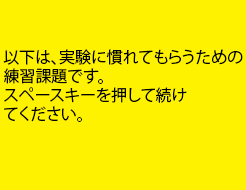
<style>
.page{position:relative;width:246px;height:190px;background:#fff200}
.page>*{position:absolute;margin:0}
.t1{font:16px "KozGoPr6N-Regular";color:#000000}
</style>
<div class="page">
<p class="t1" style="left:3px;top:49px;width:240px;height:73px">以下は、実験に慣れてもらうための<br>練習課題です。<br>スペースキーを押して続け<br>てください。</p>
</div>
